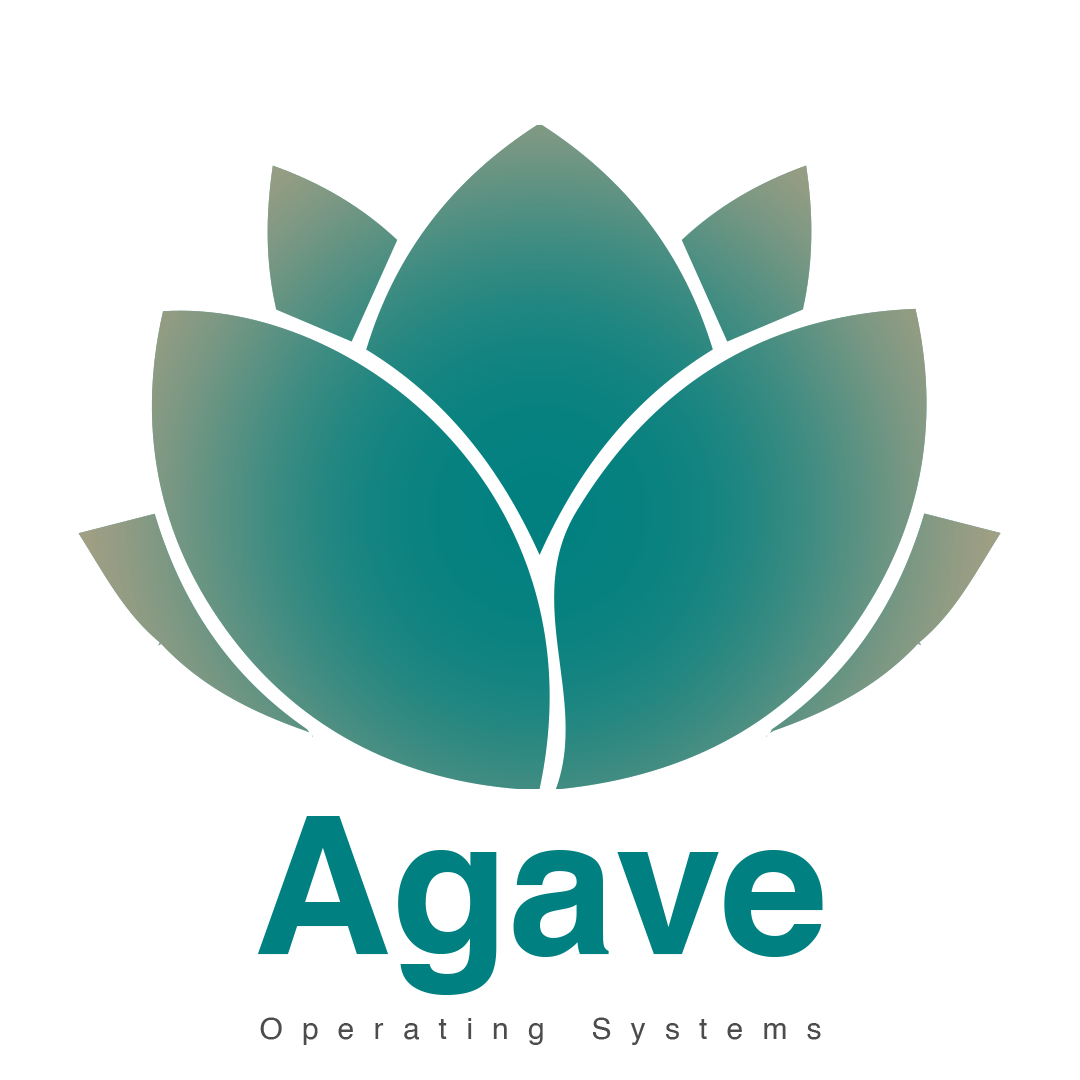
<style>
.page{position:relative;width:1080px;height:1080px;background:#ffffff}
.page>*{position:absolute;margin:0}
.t1{font:30px/85px "Helvetica";letter-spacing:0.64em;color:#4c4c4c}
.t2{font:191.3px/85px "Helvetica-Bold";color:#008080}
</style>
<div class="page">
<p class="t1" style="left:257px;top:816px;width:566px;height:229px;text-align:center"><span class="t2">Agave<br></span>Operating Systems</p>
</div>
